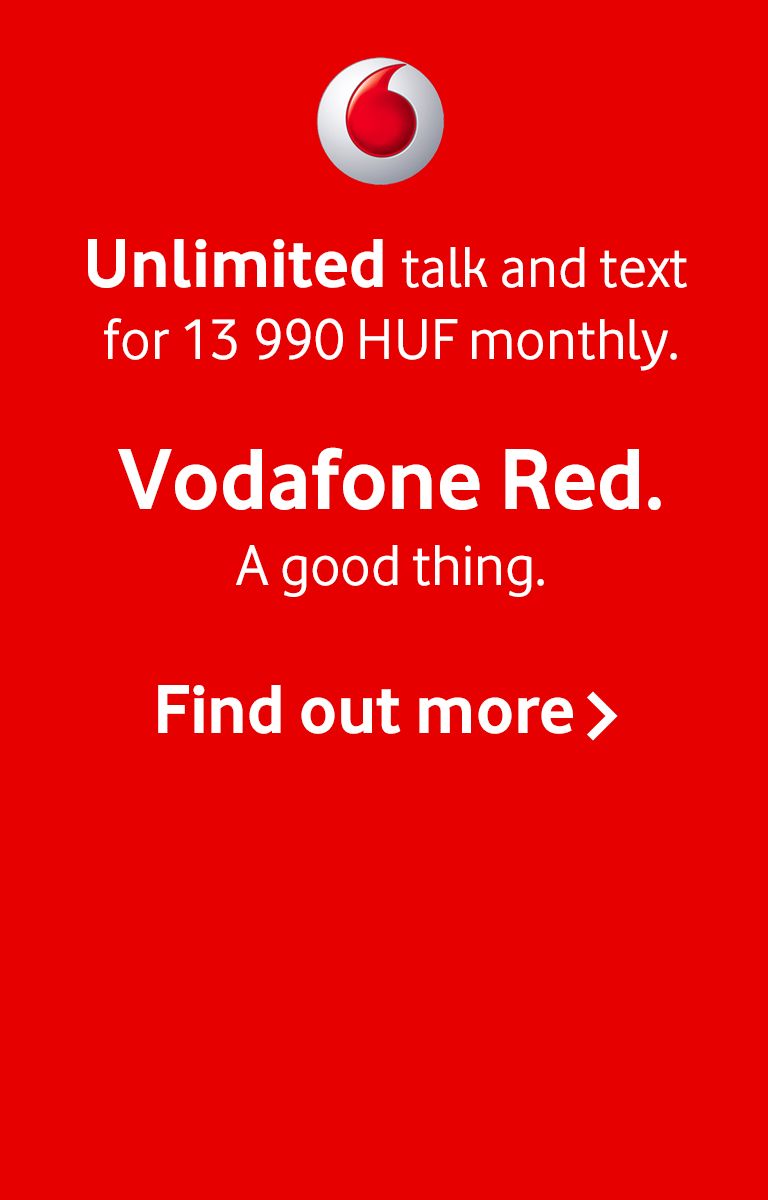
<style>
.page{position:relative;width:768px;height:1200px;background:#e60000}
.page>*{position:absolute;margin:0}
.t1{font:60px/54px "VodafoneRg-Regular";color:#ffffff}
.t2{font:72px/72px "VodafoneRg-Bold";color:#ffffff}
.t3{font:60px/72px "VodafoneRg-Regular";color:#ffffff}
.t4{font:90px/130px "VodafoneRg-Bold";color:#ffffff}
.t5{font:60px/76px "VodafoneRg-Regular";color:#ffffff}
.t6{font:72px "VodafoneRg-Bold";color:#ffffff}
</style>
<div class="page">
<p class="t1" style="left:88px;top:239px;width:599px;height:132px;text-align:center"><span class="t2">Unlimited </span><span class="t3">talk and text <br>for </span>13 990 HUF monthly.</p>
<p class="t4" style="left:118px;top:447px;width:543px;height:150px;text-align:center"><span class="t1"> <br></span>Vodafone Red.<br><span class="t5">A good thing.</span></p>
<p class="t6" style="left:158px;top:685px;width:415px;height:49px">Find out more</p>
</div>
